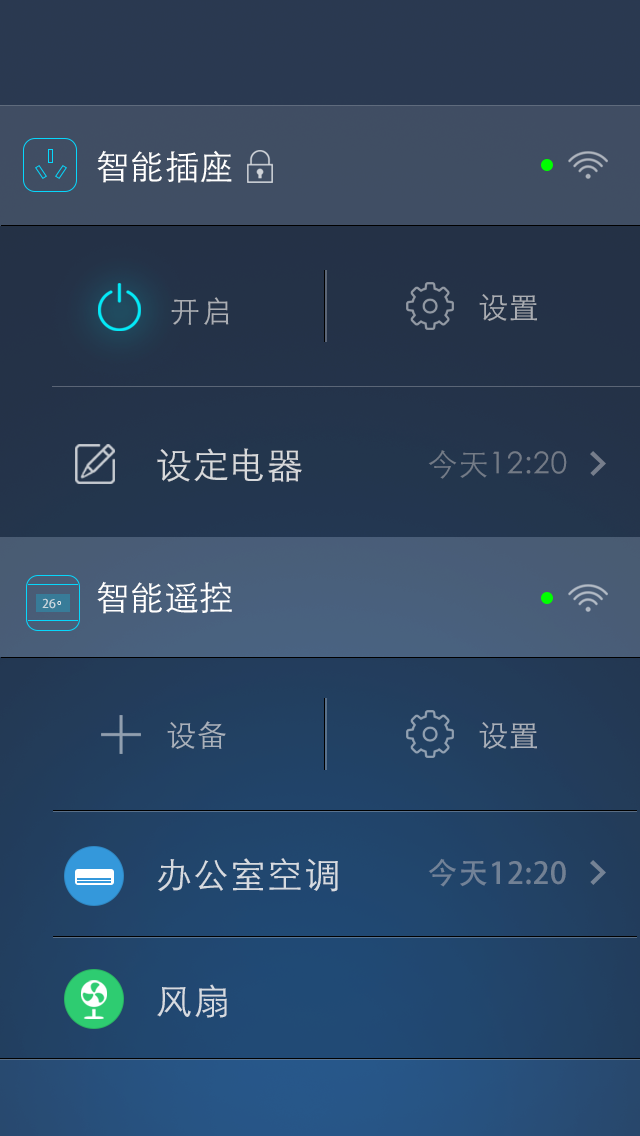
<style>
.page{position:relative;width:640px;height:1136px}
.page>*{position:absolute;margin:0}
.t1{font:34px "STHeitiSC-Light";letter-spacing:0.025em;color:#ffffff}
.t2{font:30px "STHeitiSC-Light";letter-spacing:0.025em;color:#aaadb3}
.t3{font:36px "STHeitiSC-Light";letter-spacing:0.025em;color:#d7d9db}
.t4{font:30px "STHeitiSC-Light";letter-spacing:0.025em;color:#737b86}
.t5{font:12px "AdobeHeitiStd-Regular";letter-spacing:0.025em;color:#c9d7de}
.t6{font:12px "AdobeHeitiStd-Regular";letter-spacing:0.025em}
.t7{font:30px "STHeitiSC-Light";letter-spacing:0.025em;color:#a9b1bb}
.t8{font:30px "STHeitiSC-Light";letter-spacing:0.025em;color:#aab0ba}
.t9{font:36px "STHeitiSC-Light";letter-spacing:0.025em;color:#d6dbe1}
.t10{font:30px "AdobeHeitiStd-Regular";letter-spacing:0.025em;color:#728195}
</style>
<div class="page">
<p class="t1" style="left:97px;top:150px;width:135px;height:33px">智能插座</p>
<p class="t2" style="left:479px;top:294px;width:58px;height:27px">设置</p>
<p class="t2" style="left:171px;top:297px;width:58px;height:28px">开启</p>
<p class="t3" style="left:157px;top:448px;width:145px;height:34px">设定电器</p>
<p class="t4" style="left:428px;top:450px;width:139px;height:29px">今天12:20</p>
<p class="t1" style="left:97px;top:581px;width:135px;height:33px">智能遥控</p>
<p class="t5" style="left:42px;top:598px;width:14px;height:11px">26</p>
<p class="t6" style="left:57px;top:601px;width:4px;height:4px">o</p>
<p class="t7" style="left:167px;top:721px;width:59px;height:28px">设备</p>
<p class="t8" style="left:479px;top:722px;width:58px;height:27px">设置</p>
<p class="t9" style="left:157px;top:858px;width:181px;height:34px">办公室空调</p>
<p class="t10" style="left:428px;top:858px;width:138px;height:29px">今天12:20</p>
<p class="t9" style="left:157px;top:984px;width:70px;height:34px">风扇</p>
</div>
